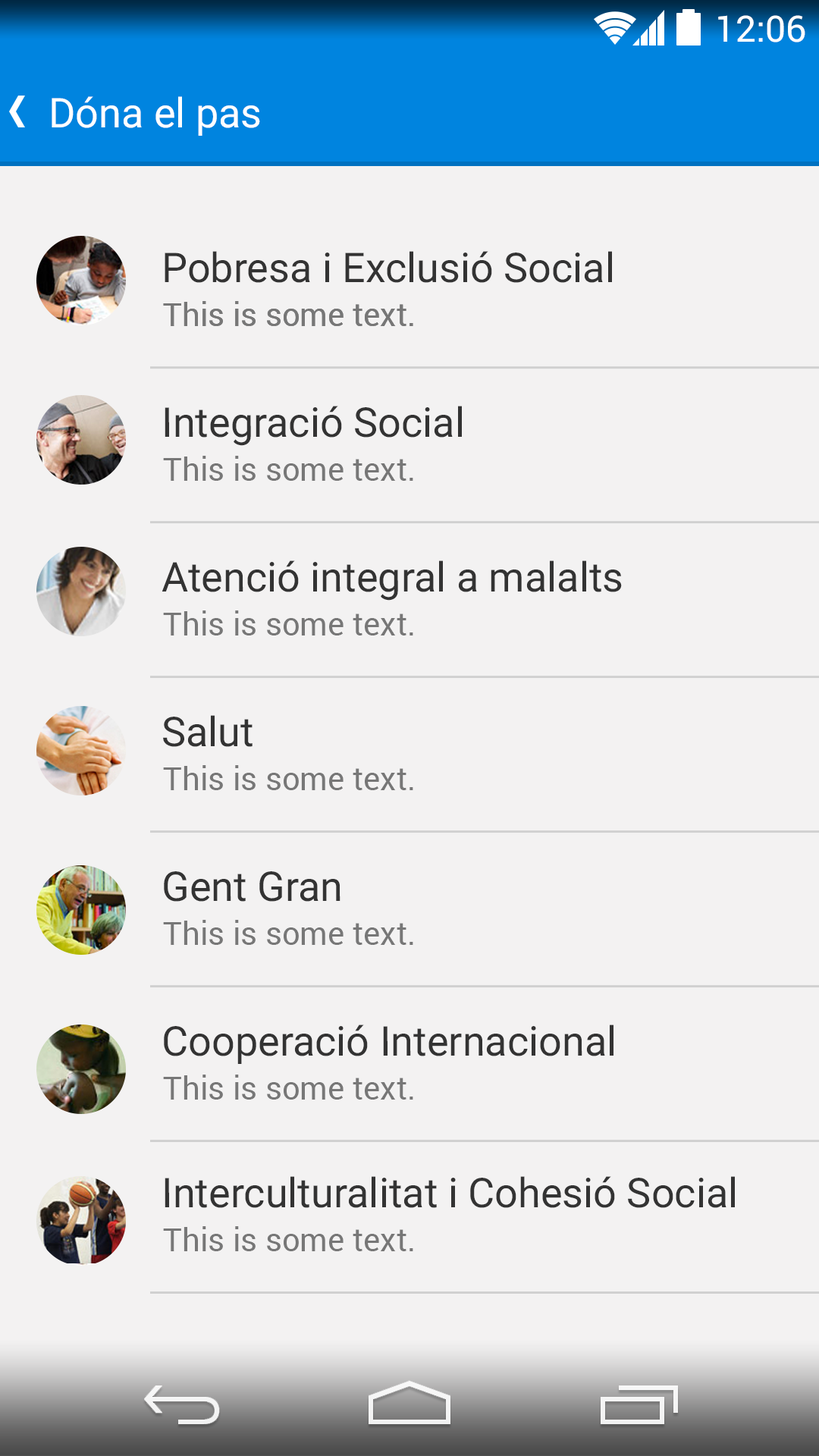
<style>
.page{position:relative;width:819px;height:1456px;background:#f3f2f2}
.page>*{position:absolute;margin:0}
.t1{font:36.4px "Roboto-Regular";color:#ffffff}
.t2{font:40.9px "Roboto-Regular";color:#ffffff}
.t3{font:40.9px "Roboto-Regular";color:#333333}
.t4{font:31.8px "Roboto-Regular";color:#777777}
</style>
<div class="page">
<p class="t1" style="left:718px;top:15px;width:87px;height:27px">12:06</p>
<p class="t2" style="left:52px;top:96px;width:208px;height:40px">Dóna el pas</p>
<p class="t3" style="left:165px;top:251px;width:447px;height:32px">Pobresa i Exclusió Social</p>
<p class="t4" style="left:163px;top:301px;width:250px;height:25px">This is some text.</p>
<p class="t4" style="left:163px;top:301px;width:250px;height:25px">This is some text.</p>
<p class="t3" style="left:165px;top:406px;width:297px;height:40px">Integració Social</p>
<p class="t4" style="left:163px;top:456px;width:250px;height:25px">This is some text.</p>
<p class="t3" style="left:162px;top:560px;width:460px;height:41px">Atenció integral a malalts</p>
<p class="t4" style="left:163px;top:610px;width:250px;height:25px">This is some text.</p>
<p class="t3" style="left:163px;top:715px;width:90px;height:32px">Salut</p>
<p class="t4" style="left:163px;top:765px;width:250px;height:25px">This is some text.</p>
<p class="t3" style="left:164px;top:871px;width:176px;height:31px">Gent Gran</p>
<p class="t4" style="left:163px;top:920px;width:250px;height:25px">This is some text.</p>
<p class="t3" style="left:164px;top:1024px;width:449px;height:40px">Cooperació Internacional</p>
<p class="t4" style="left:163px;top:1075px;width:250px;height:25px">This is some text.</p>
<p class="t3" style="left:165px;top:1176px;width:570px;height:32px">Interculturalitat i Cohesió Social</p>
<p class="t4" style="left:163px;top:1226px;width:250px;height:25px">This is some text.</p>
</div>
